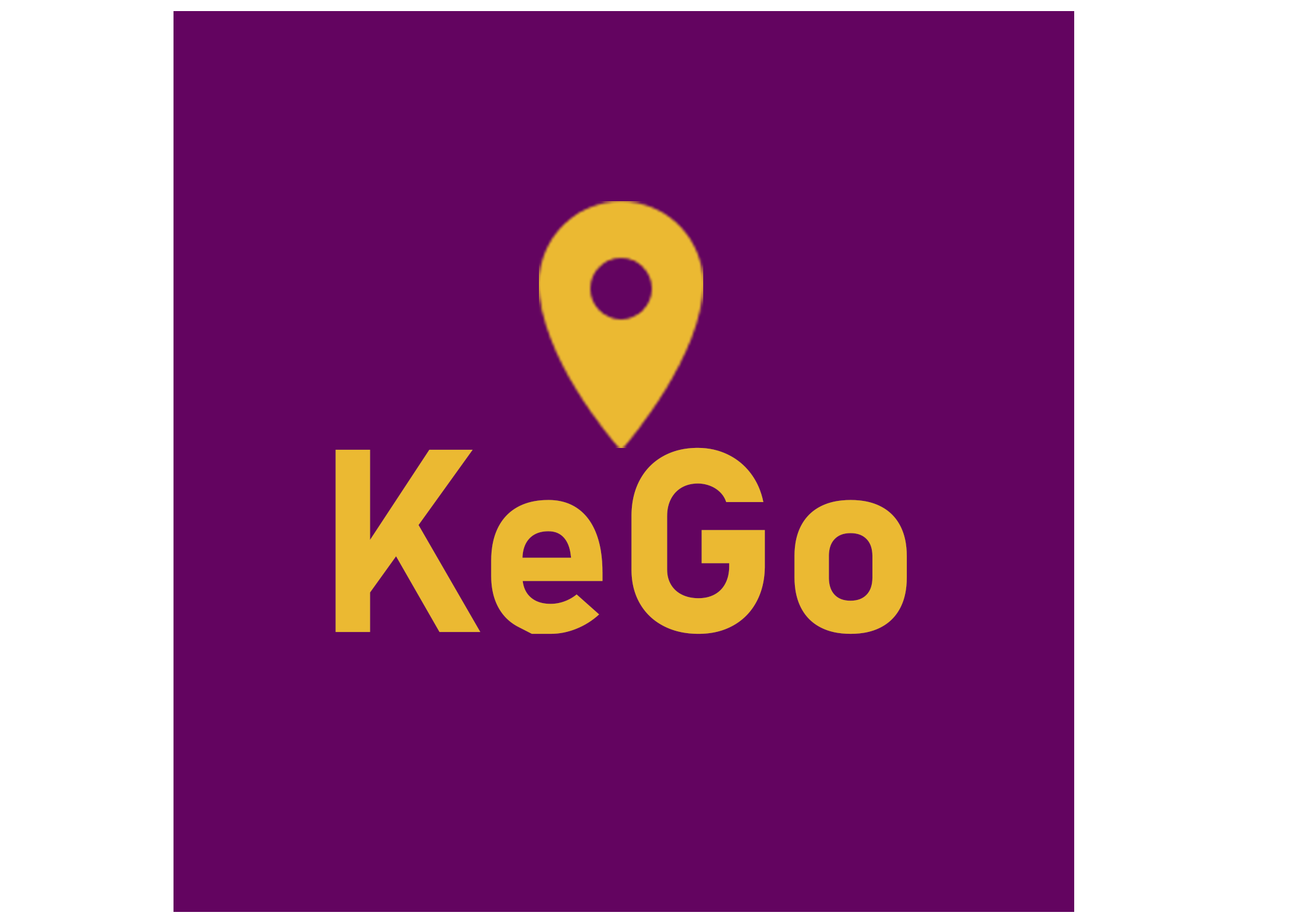
<style>
.page{position:relative;width:1292px;height:923px;background:#630460}
.page>*{position:absolute;margin:0}
.t1{font:256.4px "Bahnschrift-Bold";color:#ebb932}
</style>
<div class="page">
<p class="t1" style="left:335px;top:447px;width:572px;height:187px">KeGo</p>
</div>
